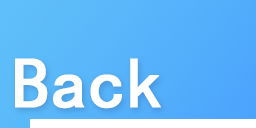
<style>
.page{position:relative;width:256px;height:128px}
.page>*{position:absolute;margin:0}
.t1{font:72px "SimHei";color:#ffffff;font-weight:bold}
</style>
<div class="page">
<p class="t1" style="left:15px;top:58px;width:146px;height:51px">Back</p>
</div>
